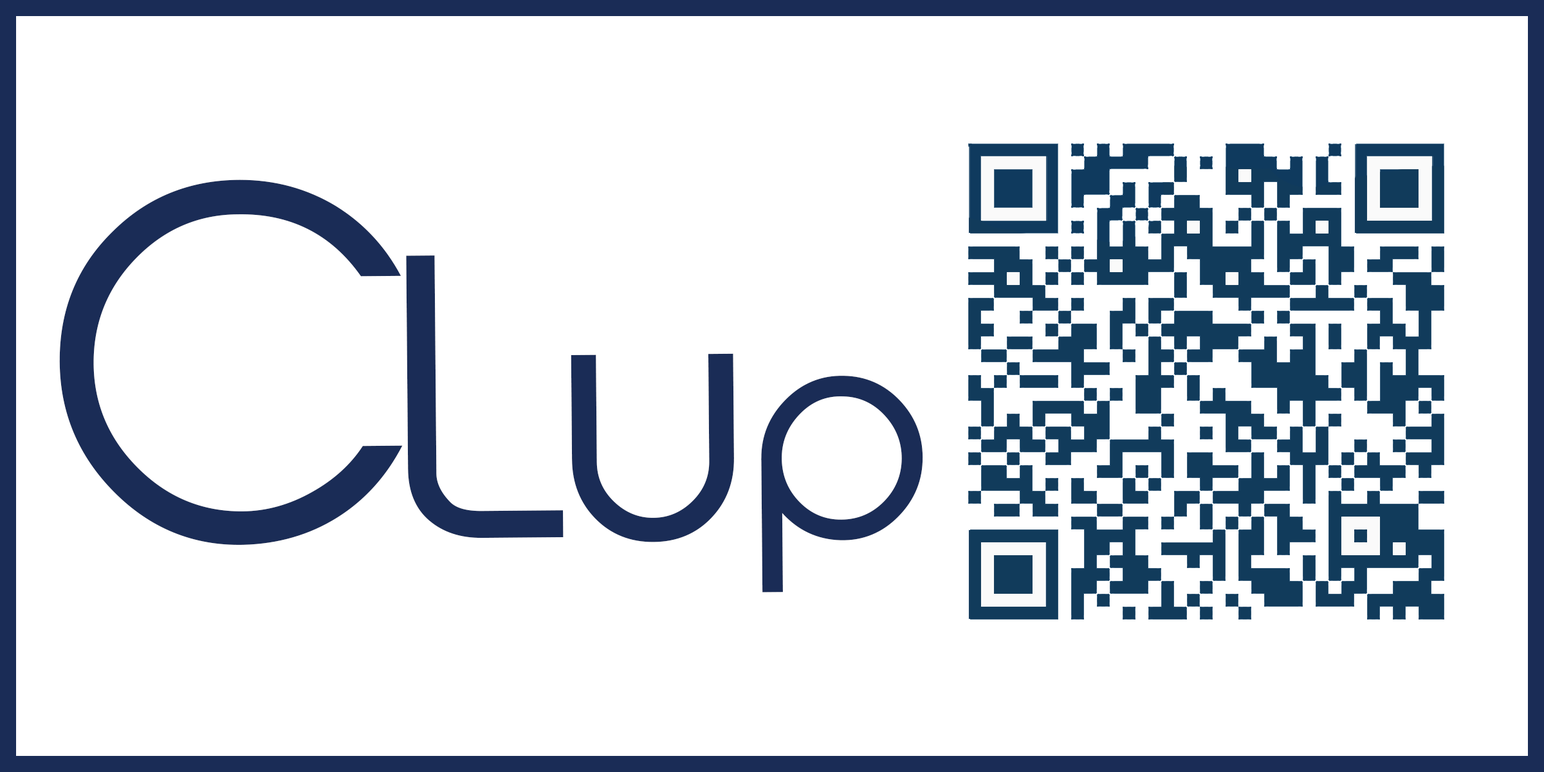
<style>
.page{position:relative;width:1544px;height:772px;background:#ffffff}
.page>*{position:absolute;margin:0}
.t1{font:459px "AbeatbyKai";color:#1a2c56}
.t2{font:367.2px "AbeatbyKai";color:#1a2c56}
.t3{font:321.3px "AbeatbyKai";color:#1a2c56}
.t4{font:275.4px "AbeatbyKai";color:#1a2c56}
</style>
<div class="page">
<p class="t1" style="left:59px;top:180px;width:864px;height:413px">C<span class="t2">L</span><span class="t3">u</span><span class="t4">p</span></p>
</div>
